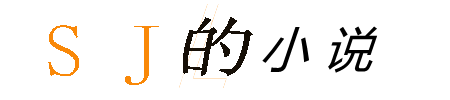
<style>
.page{position:relative;width:450px;height:100px;background:#ffffff}
.page>*{position:absolute;margin:0}
.t1{font:55.2px "SimSun";color:#160f07;scale:1.2 1}
.t2{font:75.2px "SimSun";color:#f98808;scale:1.03 1}
</style>
<div class="page">
<p class="t1" style="left:183px;top:17px;width:70px;height:59px">的</p>
<p class="t2" style="left:48px;top:25px;width:111px;height:60px">S J</p>
</div>
